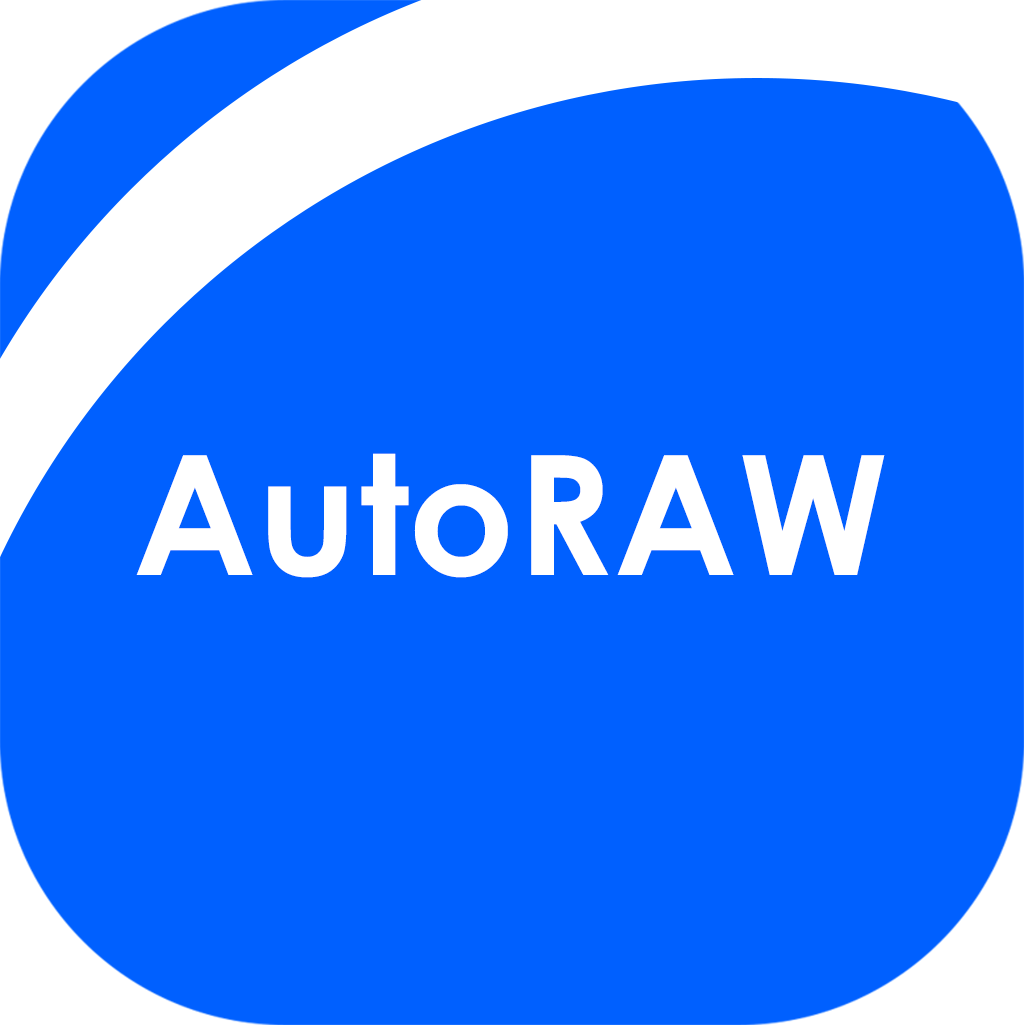
<style>
.page{position:relative;width:1024px;height:1025px;background:#0060ff}
.page>*{position:absolute;margin:0}
.t1{font:166.8px "CenturyGothic-Bold";color:#ffffff}
</style>
<div class="page">
<p class="t1" style="left:136px;top:453px;width:749px;height:125px">AutoRAW</p>
</div>
